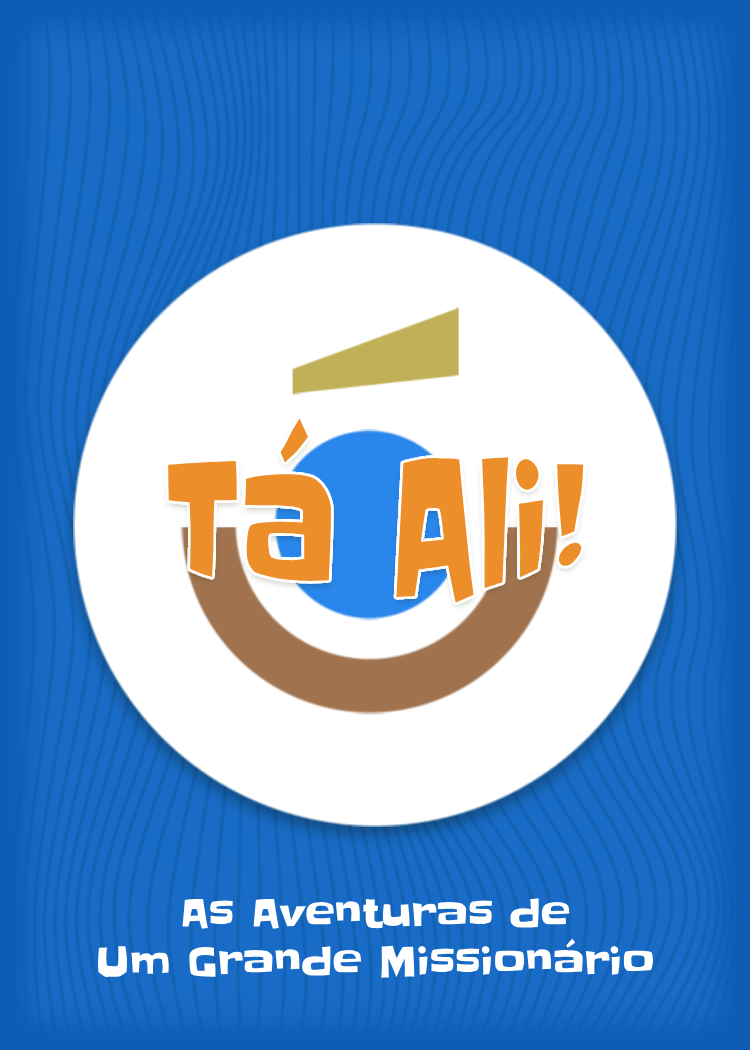
<style>
.page{position:relative;width:750px;height:1050px;background:#ffffff}
.page>*{position:absolute;margin:0}
.t1{font:119.8px "Slackey-Regular";color:#ec8e29}
.t2{font:40px "Slackey-Regular";color:#ffffff}
</style>
<div class="page">
<p class="t1" style="left:168px;top:418px;width:416px;height:185px">Tá Ali!</p>
<p class="t2" style="left:98px;top:898px;width:555px;height:80px;text-align:center">As Aventuras de<br>Um Grande Missionário</p>
</div>
